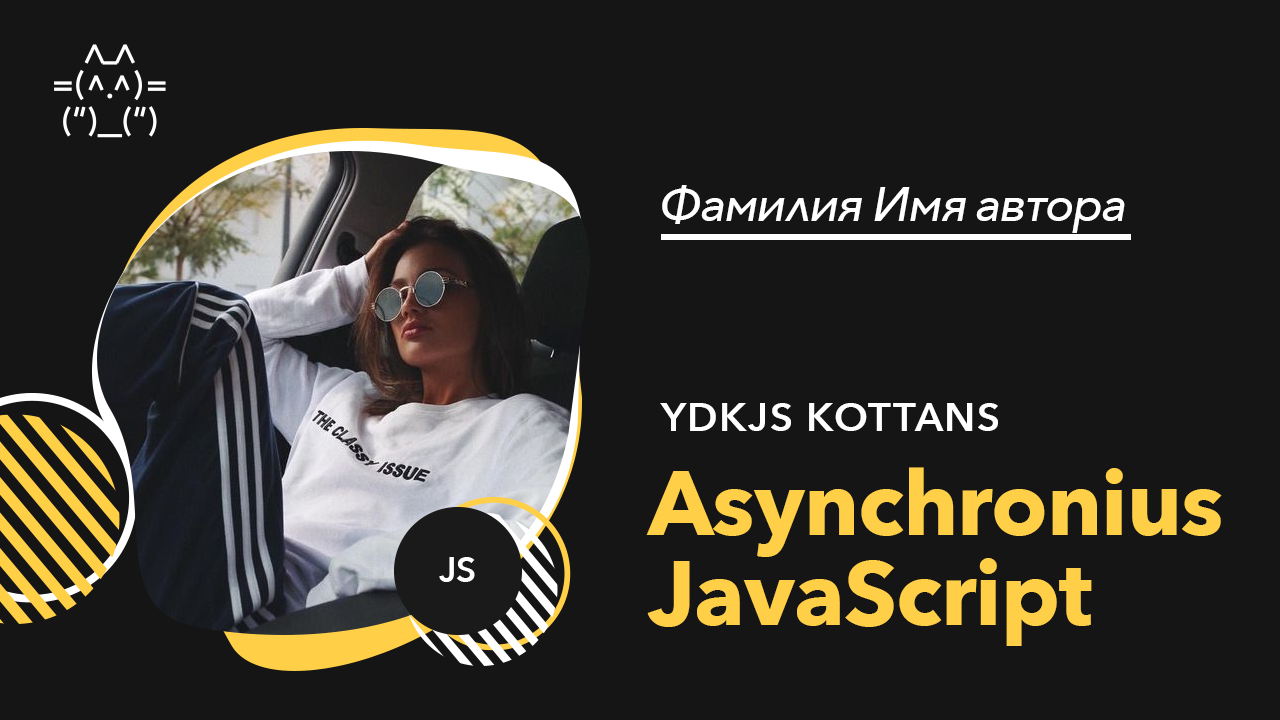
<style>
.page{position:relative;width:1280px;height:720px;background:#151515}
.page>*{position:absolute;margin:0}
.t1{font:48px "AvenirNext-MediumItalic";letter-spacing:-0.04em;color:#ffffff}
.t2{font:40px "AvenirNext-DemiBold";letter-spacing:0.04em;color:#ffffff;text-transform:uppercase}
.t3{font:90px/90px "AvenirNext-Bold";letter-spacing:-0.01em;color:#ffd047}
</style>
<div class="page">
<p class="t1" style="left:662px;top:185px;width:463px;height:48px">Фамилия Имя автора</p>
<p class="t2" style="left:660px;top:403px;width:338px;height:28px">YDKJS Kottans</p>
<p class="t3" style="left:646px;top:467px;width:576px;height:179px">Asynchronius<br>JavaScript</p>
</div>
